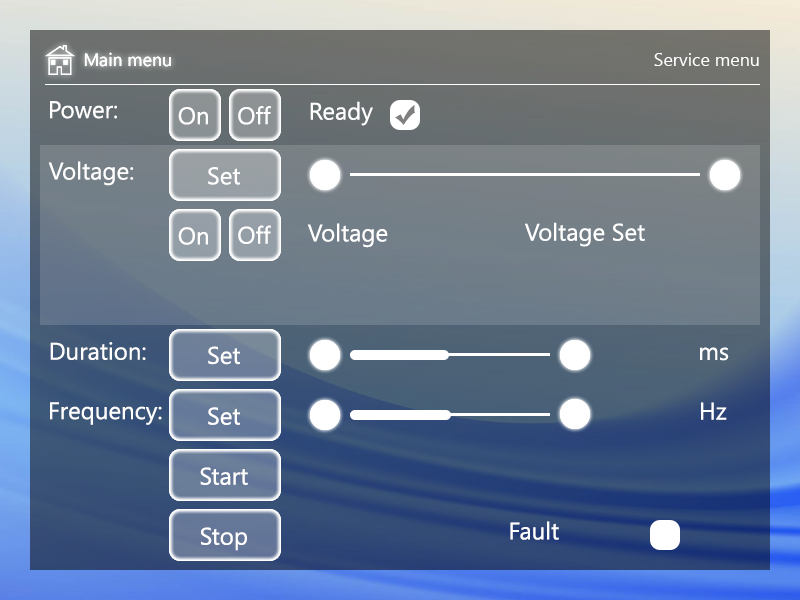
<style>
.page{position:relative;width:800px;height:600px}
.page>*{position:absolute;margin:0}
.t1{font:18px "SegoeUI";color:#ffffff}
.t2{font:24px "SegoeUI";color:#ffffff}
</style>
<div class="page">
<p class="t1" style="left:84px;top:52px;width:87px;height:15px">Main menu</p>
<p class="t1" style="left:84px;top:52px;width:87px;height:15px">Main menu</p>
<p class="t1" style="left:654px;top:53px;width:105px;height:13px">Service menu</p>
<p class="t2" style="left:50px;top:101px;width:67px;height:18px">Power:</p>
<p class="t2" style="left:310px;top:101px;width:63px;height:25px">Ready</p>
<p class="t2" style="left:178px;top:107px;width:30px;height:18px">On</p>
<p class="t2" style="left:238px;top:106px;width:33px;height:19px">Off</p>
<p class="t2" style="left:48px;top:161px;width:86px;height:25px">Voltage:</p>
<p class="t2" style="left:208px;top:167px;width:32px;height:18px">Set</p>
<p class="t2" style="left:525px;top:222px;width:120px;height:25px">Voltage Set</p>
<p class="t2" style="left:178px;top:227px;width:30px;height:18px">On</p>
<p class="t2" style="left:238px;top:225px;width:33px;height:19px">Off</p>
<p class="t2" style="left:307px;top:223px;width:81px;height:25px">Voltage</p>
<p class="t2" style="left:50px;top:342px;width:96px;height:18px">Duration:</p>
<p class="t2" style="left:208px;top:346px;width:32px;height:19px">Set</p>
<p class="t2" style="left:700px;top:347px;width:29px;height:14px">ms</p>
<p class="t2" style="left:50px;top:402px;width:112px;height:23px">Frequency:</p>
<p class="t2" style="left:208px;top:407px;width:32px;height:18px">Set</p>
<p class="t2" style="left:701px;top:402px;width:26px;height:18px">Hz</p>
<p class="t2" style="left:200px;top:467px;width:48px;height:18px">Start</p>
<p class="t2" style="left:510px;top:521px;width:49px;height:19px">Fault</p>
<p class="t2" style="left:201px;top:527px;width:46px;height:24px">Stop</p>
</div>
